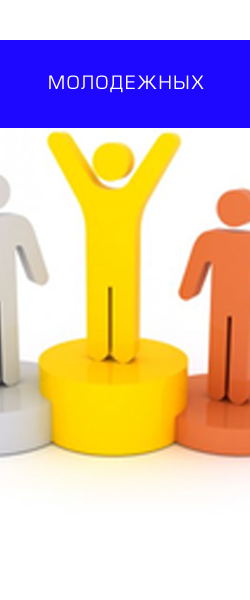
<style>
.page{position:relative;width:250px;height:600px;background:#ffffff}
.page>*{position:absolute;margin:0}
.t1{font:18px "Europe";letter-spacing:0.08em;color:#ffffff}
</style>
<div class="page">
<p class="t1" style="left:49px;top:75px;width:155px;height:18px">ÌÎËÎÄÅÆÍÛÕ</p>
</div>
